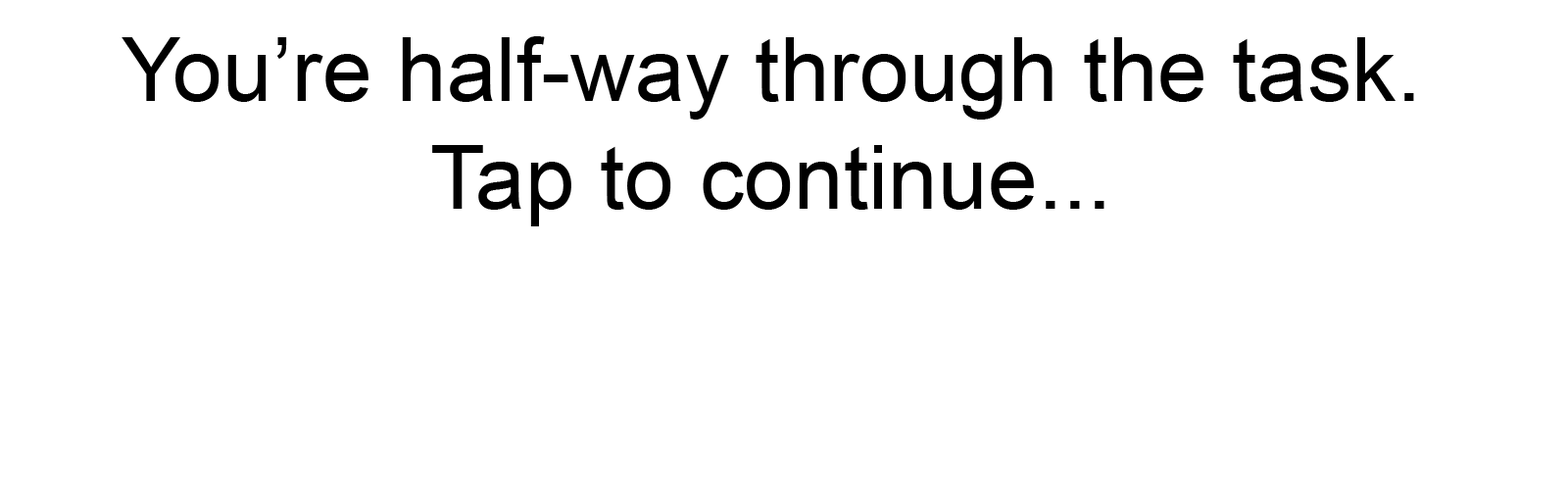
<style>
.page{position:relative;width:1568px;height:490px;background:#ffffff}
.page>*{position:absolute;margin:0}
.t1{font:88.2px/107.8px "ArialMT";color:#000000}
</style>
<div class="page">
<p class="t1" style="left:122px;top:36px;width:1292px;height:190px;text-align:center">You’re half-way through the task. <br>Tap to continue...</p>
</div>
